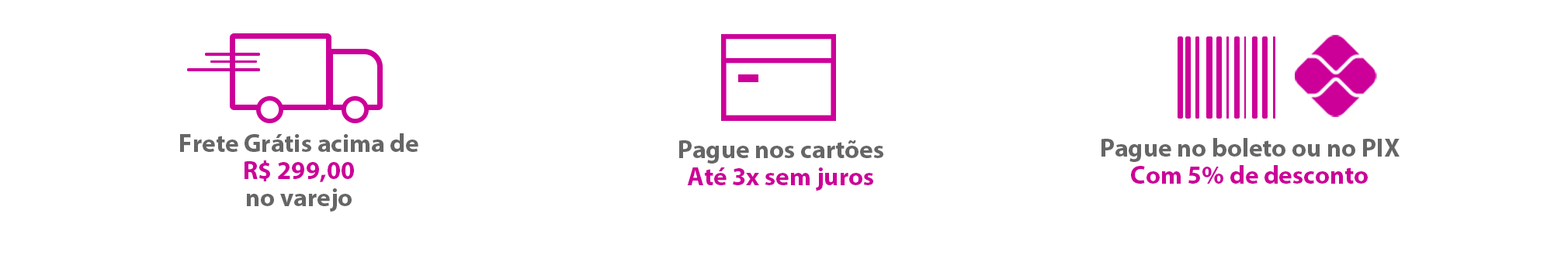
<style>
.page{position:relative;width:1568px;height:255px;background:#ffffff}
.page>*{position:absolute;margin:0}
.t1{font:25.6px/27.2px "MyriadPro-Bold";color:#666666}
.t2{font:25.6px/27.2px "MyriadPro-Bold";color:#cc0099}
</style>
<div class="page">
<p class="t1" style="left:180px;top:134px;width:238px;height:78px;text-align:center">Frete Grátis acima de<br><span class="t2">R$ 299,00<br></span>no varejo</p>
<p class="t1" style="left:679px;top:140px;width:204px;height:51px;text-align:center">Pague nos cartões<br><span class="t2">Até 3x sem juros</span></p>
<p class="t1" style="left:1101px;top:138px;width:299px;height:47px;text-align:center">Pague no boleto ou no PIX<br><span class="t2">Com 5% de desconto</span></p>
</div>
